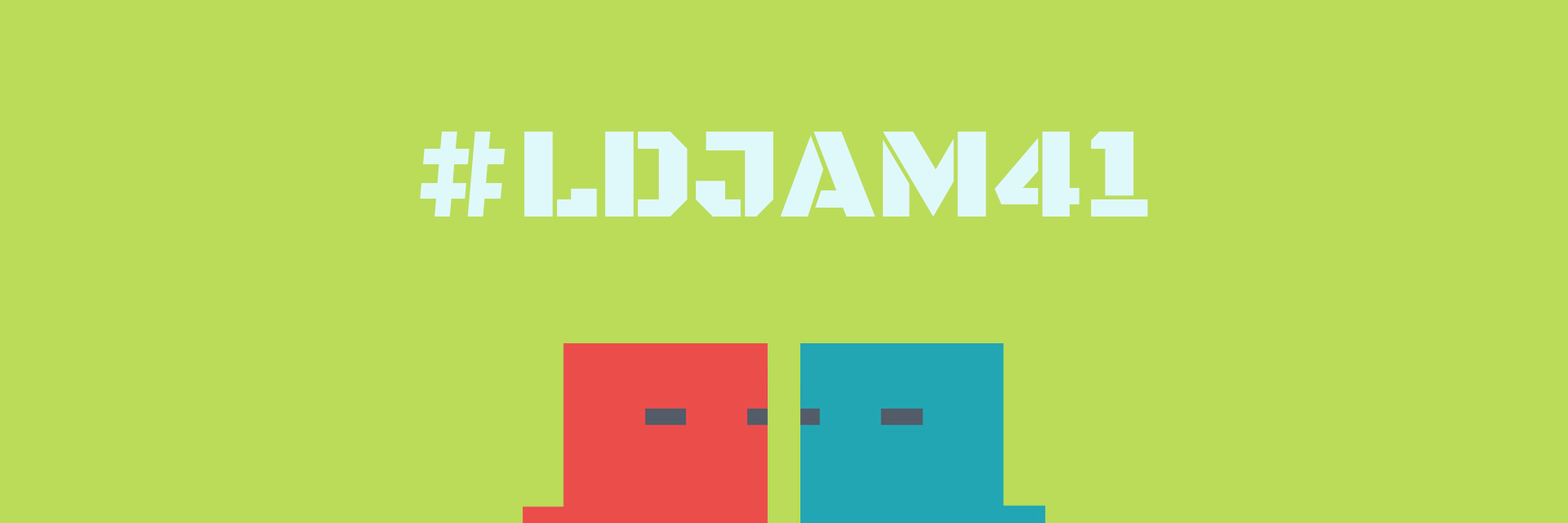
<style>
.page{position:relative;width:1568px;height:523px;background:#bbdc59}
.page>*{position:absolute;margin:0}
.t1{font:130.7px "BlackOpsOne-Regular";color:#dff9fa}
</style>
<div class="page">
<p class="t1" style="left:420px;top:131px;width:728px;height:85px">#LDJAM41</p>
</div>
